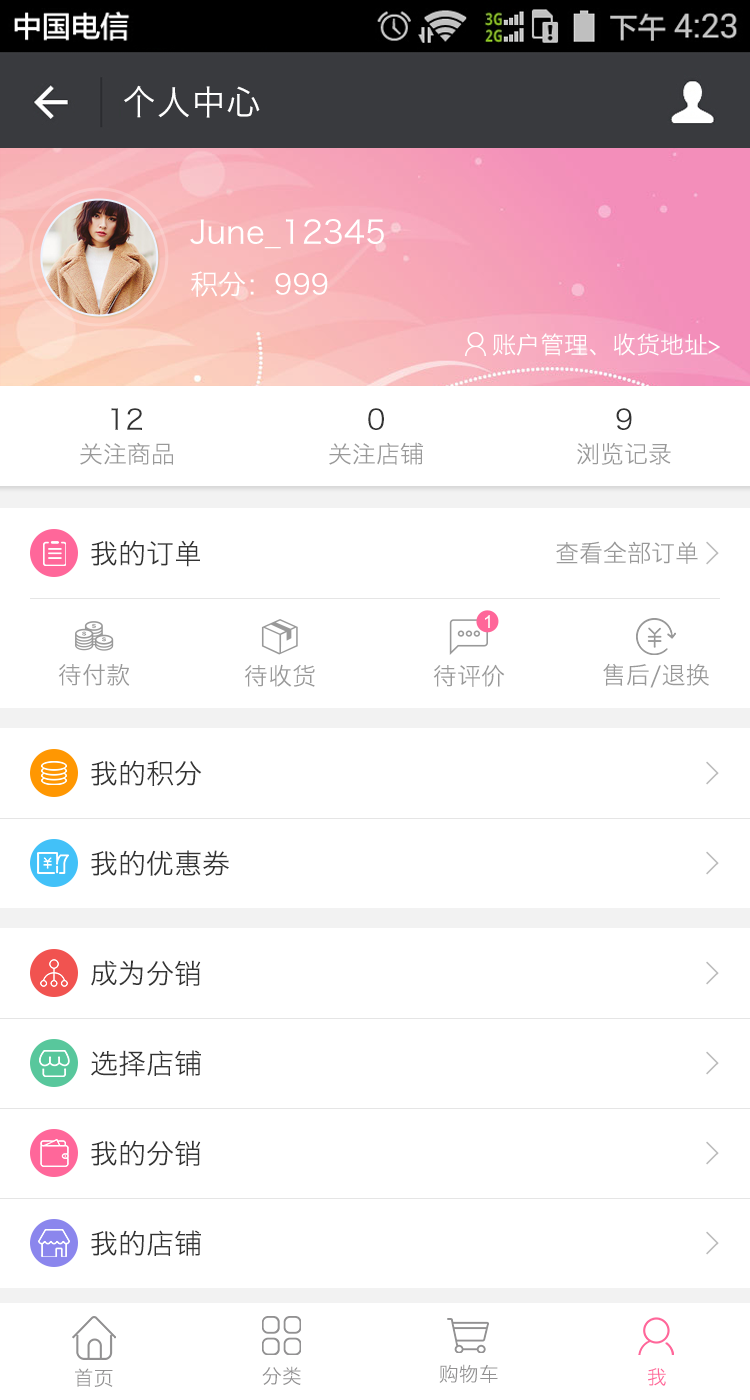
<style>
.page{position:relative;width:750px;height:1400px;background:#ffffff}
.page>*{position:absolute;margin:0}
.t1{font:34px "HiraginoSansGB-W3";letter-spacing:0.022em;color:#ffffff}
.t2{font:32px "HiraginoSansGB-W3";color:#ffffff}
.t3{font:28px "HiraginoSansGB-W3";color:#ffffff}
.t4{font:24px "HiraginoSansGB-W3";color:#ffffff}
.t5{font:28px "HiraginoSansGB-W3";color:#333333}
.t6{font:24px "HiraginoSansGB-W3";color:#999999}
.t7{font:32px "SimSun";color:#bbbbbb;font-weight:bold}
.t8{font:18px "ArialMT";letter-spacing:-0.05em;color:#ffffff}
.t9{font:20px "HiraginoSansGB-W3";color:#929192}
.t10{font:20px "HiraginoSansGB-W3";color:#ff679a}
</style>
<div class="page">
<p class="t1" style="left:124px;top:85px;width:136px;height:33px">个人中心</p>
<p class="t2" style="left:190px;top:219px;width:194px;height:30px">June_12345</p>
<p class="t3" style="left:191px;top:271px;width:137px;height:26px">积分：999</p>
<p class="t4" style="left:492px;top:333px;width:228px;height:23px">账户管理、收货地址&gt;</p>
<p class="t5" style="left:111px;top:408px;width:31px;height:22px">12</p>
<p class="t5" style="left:368px;top:408px;width:16px;height:22px">0</p>
<p class="t5" style="left:616px;top:408px;width:16px;height:22px">9</p>
<p class="t6" style="left:80px;top:442px;width:93px;height:23px">关注商品</p>
<p class="t6" style="left:329px;top:442px;width:95px;height:23px">关注店铺</p>
<p class="t6" style="left:577px;top:442px;width:94px;height:23px">浏览记录</p>
<p class="t5" style="left:91px;top:540px;width:109px;height:27px">我的订单</p>
<p class="t6" style="left:556px;top:541px;width:142px;height:23px">查看全部订单</p>
<p class="t7" style="left:706px;top:541px;width:13px;height:24px">&gt;</p>
<p class="t8" style="left:485px;top:615px;width:5px;height:13px">1</p>
<p class="t6" style="left:58px;top:663px;width:72px;height:23px">待付款</p>
<p class="t6" style="left:244px;top:664px;width:71px;height:23px">待收货</p>
<p class="t6" style="left:433px;top:664px;width:72px;height:23px">待评价</p>
<p class="t6" style="left:603px;top:663px;width:106px;height:25px">售后/退换</p>
<p class="t5" style="left:91px;top:760px;width:111px;height:26px">我的积分</p>
<p class="t7" style="left:706px;top:761px;width:13px;height:24px">&gt;</p>
<p class="t5" style="left:91px;top:850px;width:138px;height:26px">我的优惠券</p>
<p class="t7" style="left:706px;top:851px;width:13px;height:24px">&gt;</p>
<p class="t5" style="left:91px;top:960px;width:110px;height:26px">成为分销</p>
<p class="t7" style="left:706px;top:961px;width:13px;height:24px">&gt;</p>
<p class="t5" style="left:91px;top:1050px;width:110px;height:27px">选择店铺</p>
<p class="t7" style="left:706px;top:1051px;width:13px;height:24px">&gt;</p>
<p class="t5" style="left:91px;top:1140px;width:110px;height:26px">我的分销</p>
<p class="t7" style="left:706px;top:1141px;width:13px;height:24px">&gt;</p>
<p class="t5" style="left:91px;top:1230px;width:110px;height:26px">我的店铺</p>
<p class="t7" style="left:706px;top:1231px;width:13px;height:24px">&gt;</p>
<p class="t9" style="left:75px;top:1368px;width:38px;height:19px">首页</p>
<p class="t9" style="left:262px;top:1366px;width:39px;height:19px">分类</p>
<p class="t9" style="left:439px;top:1364px;width:59px;height:19px">购物车</p>
<p class="t10" style="left:648px;top:1368px;width:18px;height:18px">我</p>
</div>
